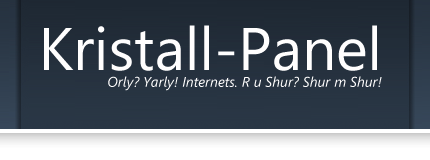
<style>
.page{position:relative;width:430px;height:160px}
.page>*{position:absolute;margin:0}
.t1{font:14px "SegoeUI-Italic";color:#fffefe}
.t2{font:60px "SegoeUI";color:#fffefe}
</style>
<div class="page">
<p class="t1" style="left:44px;top:25px;width:338px;height:66px;text-align:right"><span class="t2">Kristall-Panel<br></span>Orly? Yarly! Internets. R u Shur? Shur m Shur!</p>
</div>
